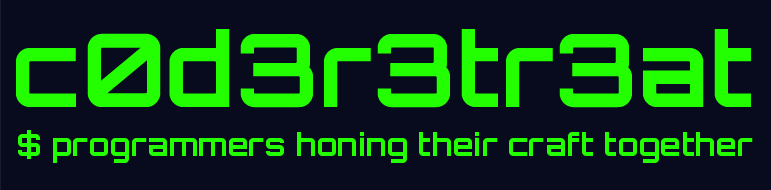
<style>
.page{position:relative;width:771px;height:190px;background:#070b1d}
.page>*{position:absolute;margin:0}
.t1{font:101.8px "Orbitron-Bold";color:#23fe00}
.t2{font:31.1px "Orbitron-Bold";color:#23fe00}
</style>
<div class="page">
<p class="t1" style="left:16px;top:29px;width:735px;height:79px">c0d3r3tr3at</p>
<p class="t2" style="left:18px;top:130px;width:735px;height:33px">$ programmers honing their craft together</p>
</div>
